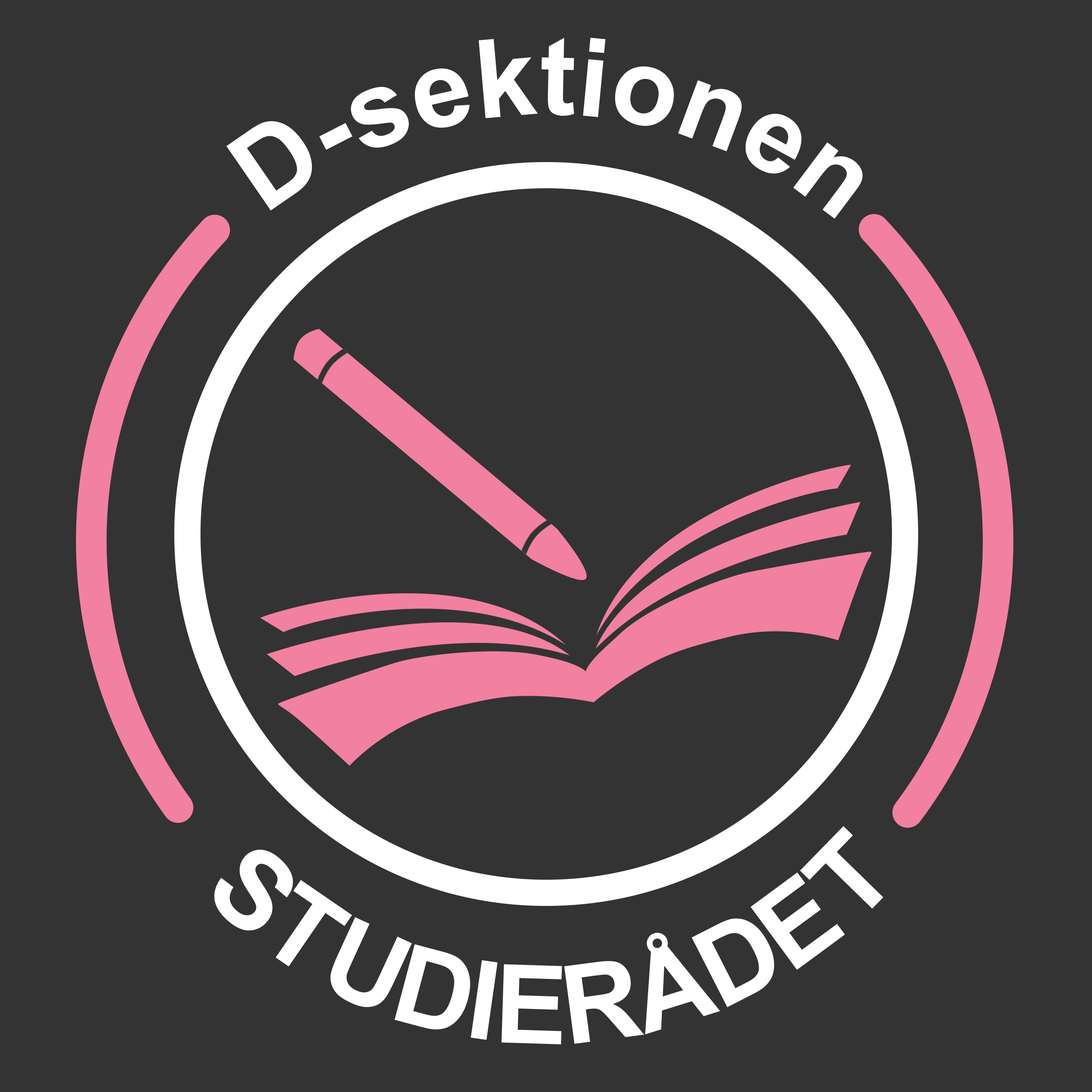
<style>
.page{position:relative;width:1092px;height:1092px;background:#333333}
.page>*{position:absolute;margin:0}
.t1{font:109.2px "Arial-BoldMT";color:#ffffff}
.t2{font:109.2px "Arial-BoldMT";color:#000000}
</style>
<div class="page">
<p class="t1" style="left:226px;top:38px;width:637px;height:181px"><span class="t2">          </span>D-sektionen</p>
<p class="t1" style="left:214px;top:826px;width:670px;height:218px"><span class="t2">     </span>ST UDIERÅDE T</p>
</div>
